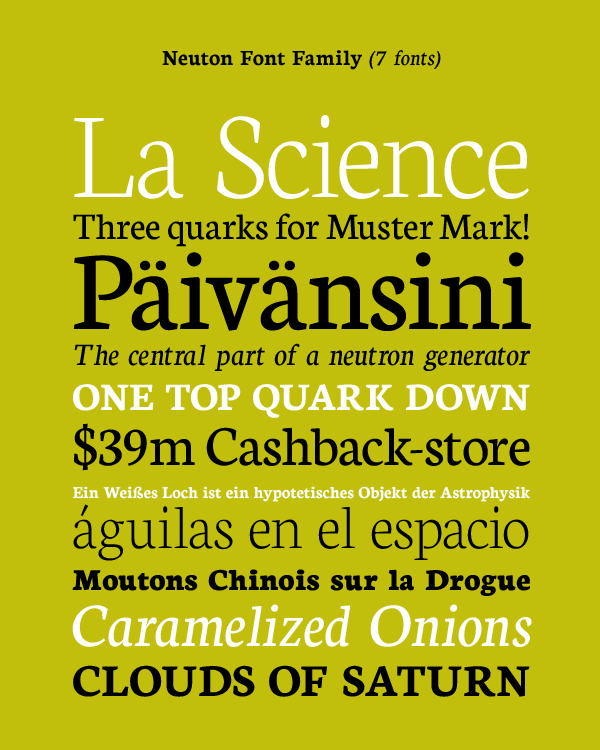
<style>
.page{position:relative;width:600px;height:750px;background:#c1bf0c}
.page>*{position:absolute;margin:0}
.t1{font:17.7px/33.3px "Neuton-Bold";color:#ffffff}
.t2{font:23.3px "Neuton-Bold";letter-spacing:0.015em;color:#000000}
.t3{font:23.3px "Neuton-Italic";letter-spacing:0.015em;color:#000000}
.t4{font:130px/131.9px "Neuton-Extralight";color:#ffffff}
.t5{font:40px/41.7px "Neuton-Regular";letter-spacing:0.005em;color:#000000}
.t6{font:120px/90.3px "Neuton-Regular";color:#000000}
.t7{font:33.3px/36.1px "Neuton-Italic";color:#000000}
.t8{font:41.7px/44.4px "Neuton-Bold";letter-spacing:0.005em;color:#ffffff;text-transform:uppercase}
.t9{font:60px/55.6px "Neuton-Regular";letter-spacing:0.002em;color:#000000}
.t10{font:66.2px/50px "Neuton-Extralight";color:#000000}
.t11{font:32.5px/41.7px "Neuton-Extrabold";color:#000000}
.t12{font:65.7px/55.6px "Neuton-Italic";letter-spacing:0.005em;color:#ffffff}
.t13{font:48.8px/50px "Neuton-Bold";letter-spacing:0.01em;color:#000000;text-transform:uppercase}
</style>
<div class="page">
<p class="t1" style="left:72px;top:50px;width:460px;height:647px;text-align:center"><span class="t2">Neuton Font Family </span><span class="t3">(7 fonts)<br></span><span class="t4">La Science<br></span><span class="t5">Three quarks for Muster Mark!<br></span><span class="t6">Päivänsini<br></span><span class="t7">The central part of a neutron generator<br></span><span class="t8">One top quark down<br></span><span class="t9">$39m Cashback-store<br></span>Ein Weißes Loch ist ein hypotetisches Objekt der Astrophysik<br><span class="t10">águilas en el espacio<br></span><span class="t11">Moutons Chinois sur la Drogue<br></span><span class="t12">Caramelized Onions<br></span><span class="t13">Clouds of Saturn</span></p>
</div>
